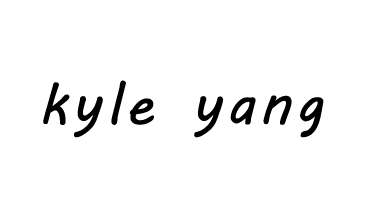
<style>
.page{position:relative;width:372px;height:212px;background:#ffffff}
.page>*{position:absolute;margin:0}
.t1{font:58.3px "MVBoli";letter-spacing:0.075em;color:#000000}
</style>
<div class="page">
<p class="t1" style="left:43px;top:80px;width:281px;height:58px">kyle yang</p>
</div>
